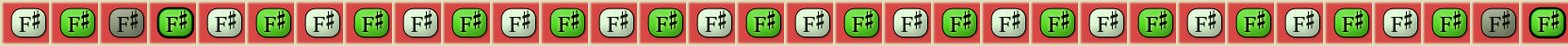
<style>
.page{position:relative;width:1568px;height:46px}
.page>*{position:absolute;margin:0}
.t1{font:22.6px "OpusChords";color:#000000}
</style>
<div class="page">
<p class="t1" style="left:19px;top:10px;width:22px;height:22px;opacity:0.9">F#</p>
<p class="t1" style="left:68px;top:10px;width:22px;height:22px">F#</p>
<p class="t1" style="left:117px;top:10px;width:22px;height:22px;opacity:0.9">F#</p>
<p class="t1" style="left:166px;top:10px;width:22px;height:22px">F#</p>
<p class="t1" style="left:215px;top:10px;width:22px;height:22px;opacity:0.9">F#</p>
<p class="t1" style="left:264px;top:10px;width:22px;height:22px">F#</p>
<p class="t1" style="left:313px;top:10px;width:22px;height:22px;opacity:0.9">F#</p>
<p class="t1" style="left:362px;top:10px;width:22px;height:22px">F#</p>
<p class="t1" style="left:411px;top:10px;width:22px;height:22px;opacity:0.9">F#</p>
<p class="t1" style="left:460px;top:10px;width:22px;height:22px">F#</p>
<p class="t1" style="left:509px;top:10px;width:22px;height:22px;opacity:0.9">F#</p>
<p class="t1" style="left:558px;top:10px;width:22px;height:22px">F#</p>
<p class="t1" style="left:607px;top:10px;width:22px;height:22px;opacity:0.9">F#</p>
<p class="t1" style="left:656px;top:10px;width:22px;height:22px">F#</p>
<p class="t1" style="left:705px;top:10px;width:22px;height:22px;opacity:0.9">F#</p>
<p class="t1" style="left:754px;top:10px;width:22px;height:22px">F#</p>
<p class="t1" style="left:803px;top:10px;width:22px;height:22px;opacity:0.9">F#</p>
<p class="t1" style="left:852px;top:10px;width:22px;height:22px">F#</p>
<p class="t1" style="left:901px;top:10px;width:22px;height:22px;opacity:0.9">F#</p>
<p class="t1" style="left:950px;top:10px;width:22px;height:22px">F#</p>
<p class="t1" style="left:999px;top:10px;width:22px;height:22px;opacity:0.9">F#</p>
<p class="t1" style="left:1048px;top:10px;width:22px;height:22px">F#</p>
<p class="t1" style="left:1097px;top:10px;width:22px;height:22px;opacity:0.9">F#</p>
<p class="t1" style="left:1146px;top:10px;width:22px;height:22px">F#</p>
<p class="t1" style="left:1195px;top:10px;width:22px;height:22px;opacity:0.9">F#</p>
<p class="t1" style="left:1244px;top:10px;width:22px;height:22px">F#</p>
<p class="t1" style="left:1293px;top:10px;width:22px;height:22px;opacity:0.9">F#</p>
<p class="t1" style="left:1342px;top:10px;width:22px;height:22px">F#</p>
<p class="t1" style="left:1391px;top:10px;width:22px;height:22px;opacity:0.9">F#</p>
<p class="t1" style="left:1440px;top:10px;width:22px;height:22px">F#</p>
<p class="t1" style="left:1489px;top:10px;width:22px;height:22px;opacity:0.9">F#</p>
<p class="t1" style="left:1538px;top:10px;width:22px;height:22px">F#</p>
</div>
